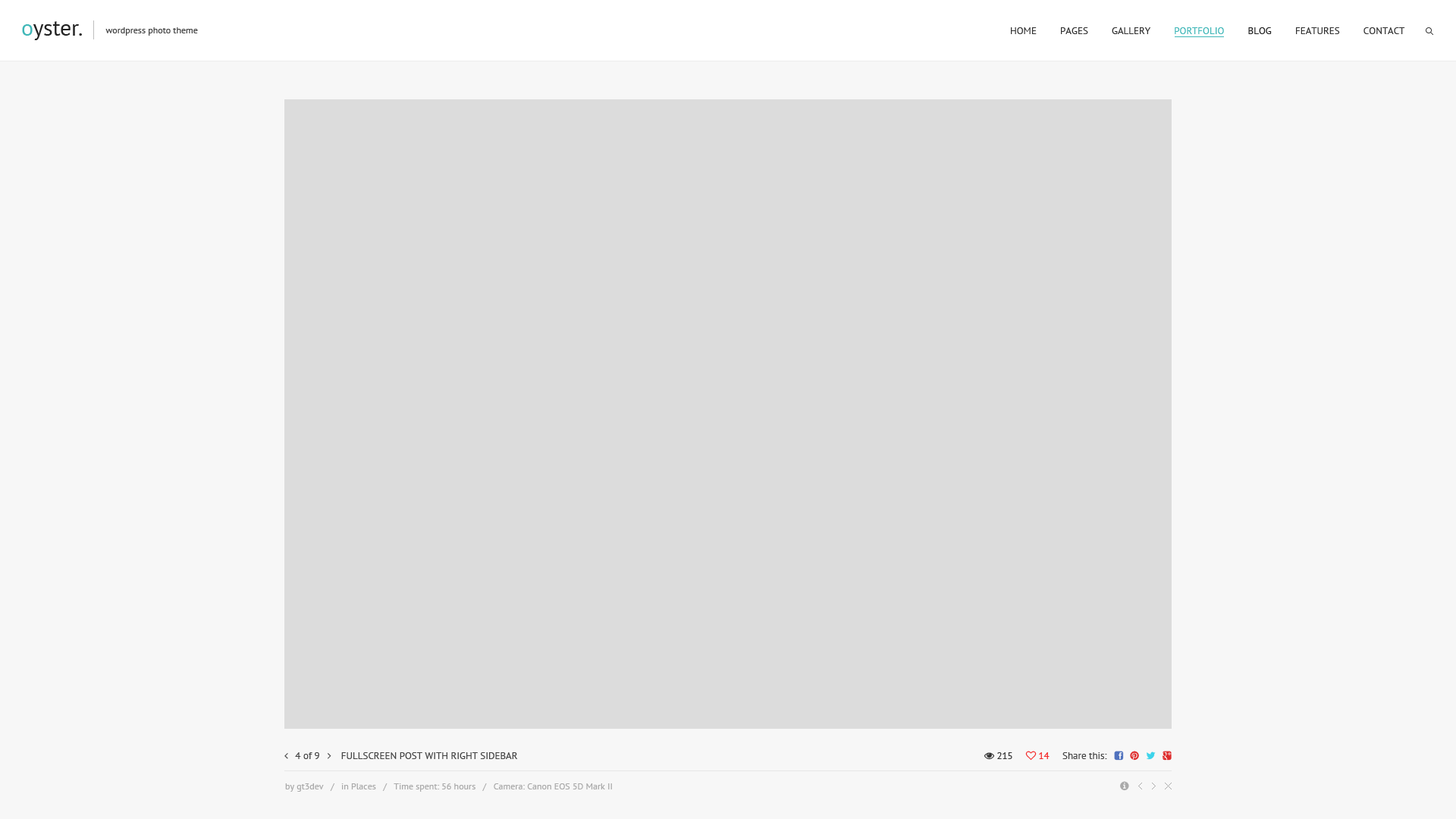
<style>
.page{position:relative;width:1456px;height:819px;background:#dcdcdc}
.page>*{position:absolute;margin:0}
.t1{font:9.1px "PTSans-Regular";color:#434343}
.t2{font:9.9px "PTSans-Regular";color:#343434;text-transform:uppercase}
.t3{font:9.9px "PTSans-Regular";color:#40b7b8;text-transform:uppercase}
.t4{font:9.9px "PTSans-Regular";color:#222222;text-transform:uppercase}
.t5{font:9.9px "PTSans-Regular";color:#444444;text-transform:uppercase}
.t6{font:9.1px "PTSans-Regular";color:#aaaaaa}
</style>
<div class="page">
<p class="t1" style="left:105px;top:27px;width:93px;height:9px">wordpress photo theme</p>
<p class="t2" style="left:1011px;top:27px;width:394px;height:7px">Home         Pages         Gallery         <span class="t3">Portfolio         </span><span class="t4">Blog         </span>Features         Contact</p>
<p class="t5" style="left:341px;top:752px;width:177px;height:7px">Fullscreen Post with Right Sidebar</p>
<p class="t6" style="left:285px;top:783px;width:327px;height:9px">by gt3dev   /   in Places   /   Time spent: 56 hours   /   Camera: Canon EOS 5D Mark II</p>
</div>
